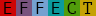
<style>
.page{position:relative;width:96px;height:16px}
.page>*{position:absolute;margin:0}
.t1{font:17px "PTMono-Regular";color:#000000}
</style>
<div class="page">
<p class="t1" style="left:4px;top:2px;width:8px;height:12px">E</p>
<p class="t1" style="left:20px;top:2px;width:8px;height:12px">F</p>
<p class="t1" style="left:36px;top:2px;width:8px;height:12px">F</p>
<p class="t1" style="left:52px;top:2px;width:8px;height:12px">E</p>
<p class="t1" style="left:67px;top:2px;width:9px;height:12px">C</p>
<p class="t1" style="left:83px;top:2px;width:10px;height:12px">T</p>
</div>
